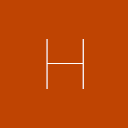
<style>
.page{position:relative;width:128px;height:128px;background:#bf4402}
.page>*{position:absolute;margin:0}
.t1{font:72px "Lato-Hairline";color:#ffffff}
</style>
<div class="page">
<p class="t1" style="left:46px;top:39px;width:38px;height:50px">H</p>
</div>
